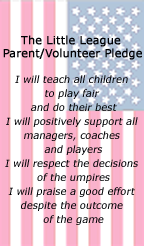
<style>
.page{position:relative;width:144px;height:246px;background:#ffffff}
.page>*{position:absolute;margin:0}
.t1{font:10px/13.9px "Verdana";color:#000104;font-style:italic}
.t2{font:11px/13.9px "Verdana";color:#000104;font-weight:bold}
.t3{font:11px "Verdana";color:#000104;font-weight:bold}
</style>
<div class="page">
<p class="t1" style="left:3px;top:35px;width:139px;height:190px;text-align:center"><span class="t2">The Little League <br></span><span class="t3">Parent/Volunteer Pledge<br><br></span>I will teach all children <br>to play fair <br>and do their best<br>I will positively support all <br>managers, coaches <br>and players<br>I will respect the decisions <br>of the umpires<br>I will praise a good effort <br>despite the outcome <br>of the game</p>
</div>
